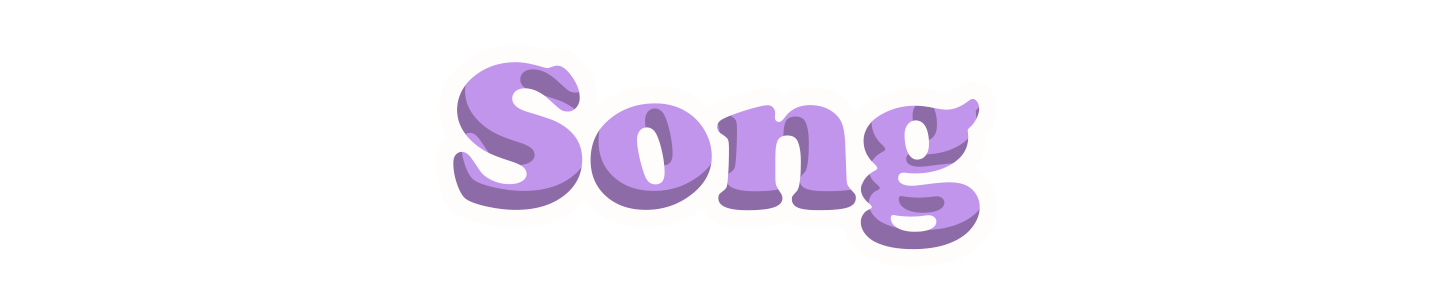
<style>
.page{position:relative;width:1430px;height:295px;background:#ffffff}
.page>*{position:absolute;margin:0}
.t1{font:213px "CooperBlack";color:#c295ec}
</style>
<div class="page">
<p class="t1" style="left:453px;top:62px;width:527px;height:188px">Song</p>
</div>
